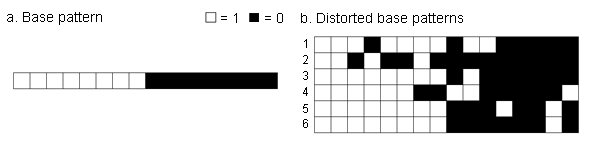
<style>
.page{position:relative;width:600px;height:166px;background:#ffffff}
.page>*{position:absolute;margin:0}
.t1{font:14px "ArialMT";color:#000000}
.t2{font:12px "ArialMT";color:#000000}
</style>
<div class="page">
<p class="t1" style="left:7px;top:12px;width:95px;height:13px">a. Base pattern</p>
<p class="t1" style="left:221px;top:13px;width:16px;height:10px">= 1</p>
<p class="t1" style="left:265px;top:13px;width:18px;height:10px">= 0</p>
<p class="t1" style="left:301px;top:13px;width:162px;height:13px">b. Distorted base patterns</p>
<p class="t2" style="left:304px;top:39px;width:3px;height:9px">1</p>
<p class="t2" style="left:303px;top:55px;width:5px;height:9px">2</p>
<p class="t2" style="left:303px;top:71px;width:5px;height:9px">3</p>
<p class="t2" style="left:303px;top:87px;width:5px;height:9px">4</p>
<p class="t2" style="left:303px;top:104px;width:5px;height:9px">5</p>
<p class="t2" style="left:303px;top:119px;width:5px;height:9px">6</p>
</div>
